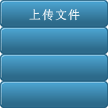
<style>
.page{position:relative;width:108px;height:108px}
.page>*{position:absolute;margin:0}
.t1{font:12px "SimSun";letter-spacing:0.09em}
</style>
<div class="page">
<p class="t1" style="left:29px;top:9px;width:51px;height:12px">上传文件</p>
</div>
